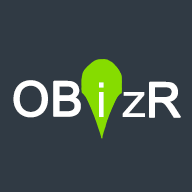
<style>
.page{position:relative;width:192px;height:192px;background:#303a44}
.page>*{position:absolute;margin:0}
.t1{font:48px "ArialMT";color:#ffffff;text-transform:uppercase;font-weight:bold}
.t2{font:48px "ArialMT";color:#ffffff}
</style>
<div class="page">
<p class="t1" style="left:13px;top:80px;width:68px;height:38px">OB</p>
<p class="t2" style="left:99px;top:82px;width:5px;height:35px">i</p>
<p class="t2" style="left:122px;top:81px;width:59px;height:37px">z<span class="t1">R</span></p>
</div>
